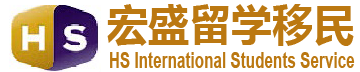
<style>
.page{position:relative;width:360px;height:72px;background:#ffffff}
.page>*{position:absolute;margin:0}
.t1{font:43.2px "MicrosoftYaHeiUI-Bold";color:#bc7811;scale:0.96 1}
.t2{font:21.6px "Arial-BoldMT";color:#bc7811;scale:0.71 1}
</style>
<div class="page">
<p class="t1" style="left:107px;top:4px;width:247px;height:42px">宏盛留学移民</p>
<p class="t2" style="left:110px;top:52px;width:245px;height:16px">HS International Students Service</p>
</div>
